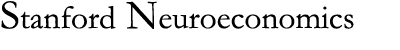
<style>
.page{position:relative;width:400px;height:50px;background:#ffffff}
.page>*{position:absolute;margin:0}
.t1{font:33.3px "Garamond";color:#000000}
.t2{font:41.7px "Garamond";color:#000000}
</style>
<div class="page">
<p class="t1" style="left:1px;top:1px;width:353px;height:28px"><span class="t2">S</span>tanford<span class="t2"> N</span>euroeconomics</p>
</div>
